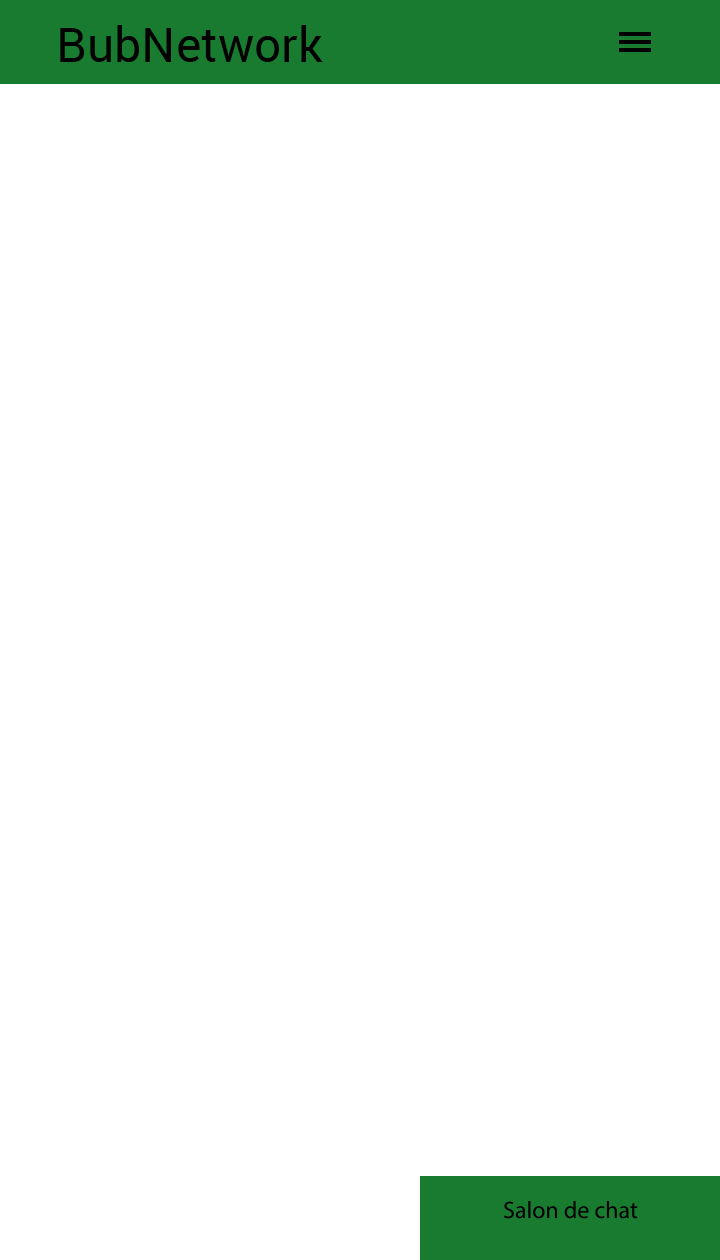
<style>
.page{position:relative;width:720px;height:1260px;background:#ffffff}
.page>*{position:absolute;margin:0}
.t1{font:48px "Roboto-Regular";color:#010101}
</style>
<div class="page">
<p class="t1" style="left:60px;top:25px;width:263px;height:37px">BubNetwork</p>
</div>
